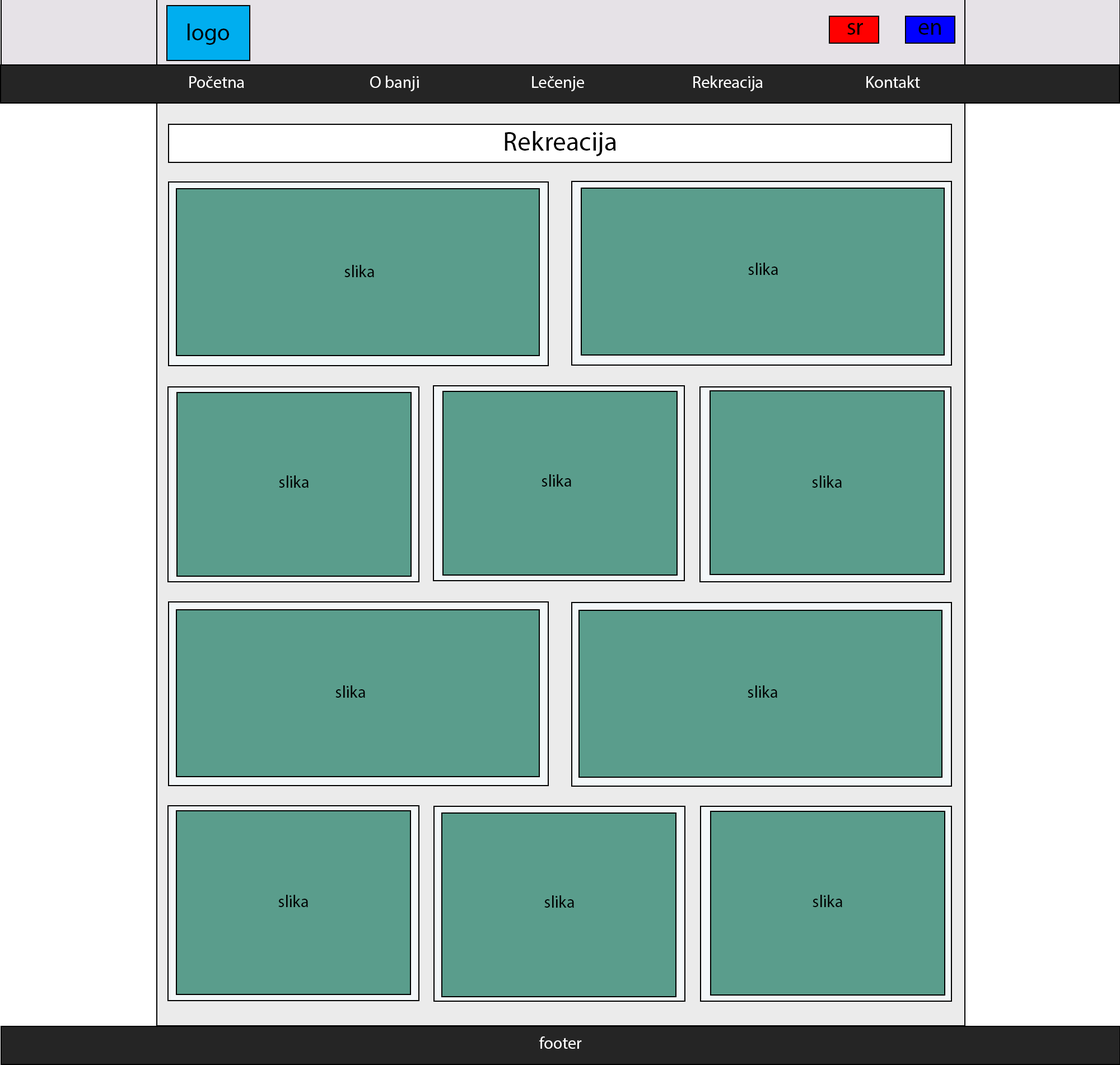
<style>
.page{position:relative;width:1120px;height:1065px;background:#5a9d8c}
.page>*{position:absolute;margin:0}
.t1{font:23.3px "MyriadPro-Regular";color:#000101}
.t2{font:16.8px "MyriadPro-Regular";color:#ffffff}
.t3{font:16.8px "MyriadPro-Regular";color:#000101}
.t4{font:26.9px "MyriadPro-Regular";color:#000000}
.t5{font:16.8px "MyriadPro-Regular";color:#000000}
</style>
<div class="page">
<p class="t1" style="left:188px;top:24px;width:41px;height:21px">logo</p>
<p class="t1" style="left:847px;top:23px;width:16px;height:12px">sr</p>
<p class="t1" style="left:918px;top:23px;width:23px;height:12px">en</p>
<p class="t2" style="left:189px;top:76px;width:731px;height:15px"><span class="t3"> </span>Početna       O banji      Lečenje      Rekreacija    Kontakt</p>
<p class="t4" style="left:504px;top:131px;width:112px;height:25px">Rekreacija</p>
<p class="t5" style="left:344px;top:265px;width:30px;height:12px">slika</p>
<p class="t5" style="left:748px;top:263px;width:30px;height:12px">slika</p>
<p class="t5" style="left:279px;top:475px;width:29px;height:13px">slika</p>
<p class="t5" style="left:541px;top:474px;width:30px;height:13px">slika</p>
<p class="t5" style="left:812px;top:475px;width:30px;height:13px">slika</p>
<p class="t5" style="left:335px;top:685px;width:30px;height:13px">slika</p>
<p class="t5" style="left:747px;top:685px;width:30px;height:13px">slika</p>
<p class="t5" style="left:278px;top:895px;width:30px;height:12px">slika</p>
<p class="t5" style="left:544px;top:895px;width:30px;height:13px">slika</p>
<p class="t5" style="left:812px;top:895px;width:30px;height:12px">slika</p>
<p class="t2" style="left:539px;top:1036px;width:43px;height:13px">footer</p>
</div>
